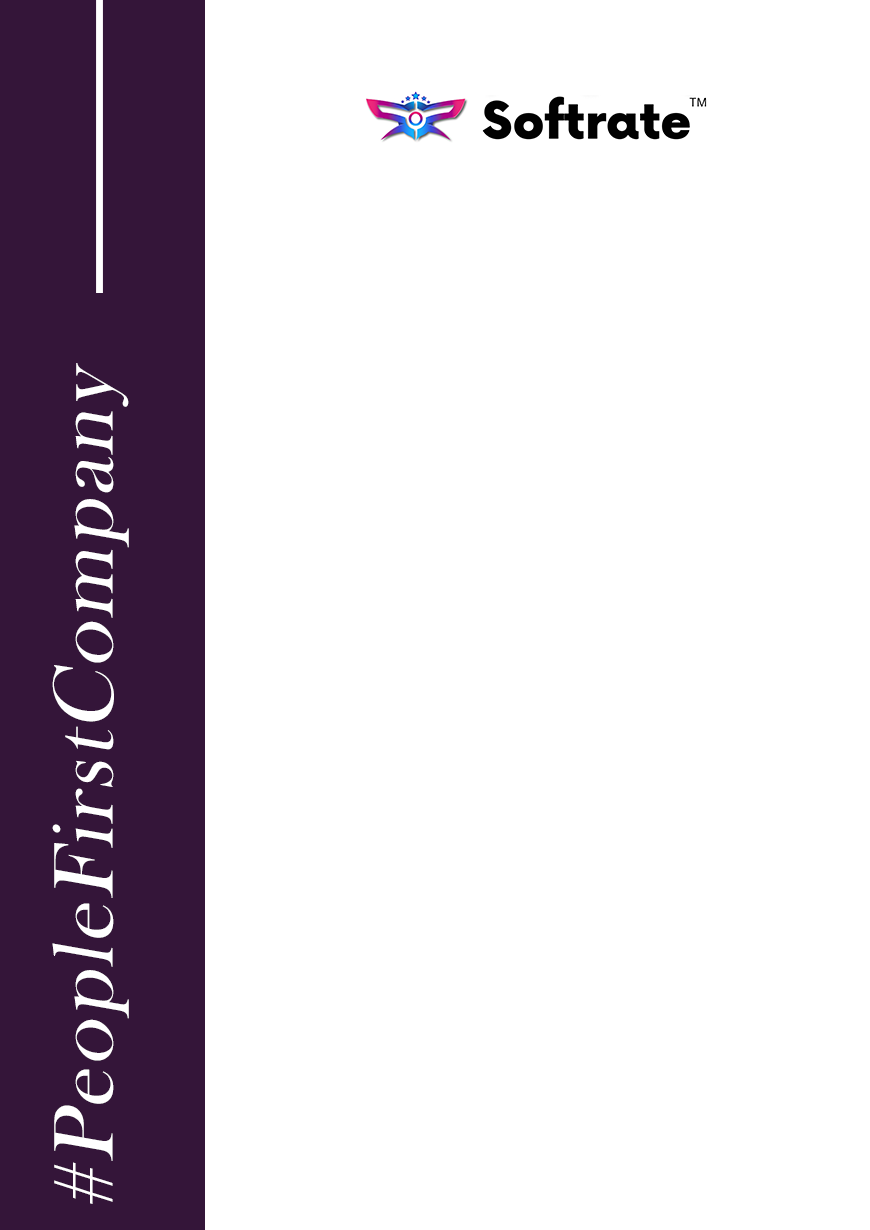
<style>
.page{position:relative;width:870px;height:1230px;background:#ffffff}
.page>*{position:absolute;margin:0}
.t1{font:87.5px "BaskOldFace";letter-spacing:0.04em;color:#ffffff;font-style:italic}
</style>
<div class="page">
<p class="t1" style="left:52px;top:363px;width:77px;height:841px;rotate:-90deg">#PeopleFirstCompany</p>
</div>
